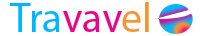
<style>
.page{position:relative;width:200px;height:36px;background:#ffffff}
.page>*{position:absolute;margin:0}
.t1{font:41.7px "MyriadPro-Regular";color:#00b7ff}
.t2{font:41.7px "MyriadPro-Regular";color:#ec038a}
.t3{font:41.7px "MyriadPro-Regular";color:#f69430}
</style>
<div class="page">
<p class="t1" style="left:9px;top:2px;width:140px;height:30px">Tra<span class="t2">vav</span><span class="t3">el</span></p>
</div>
